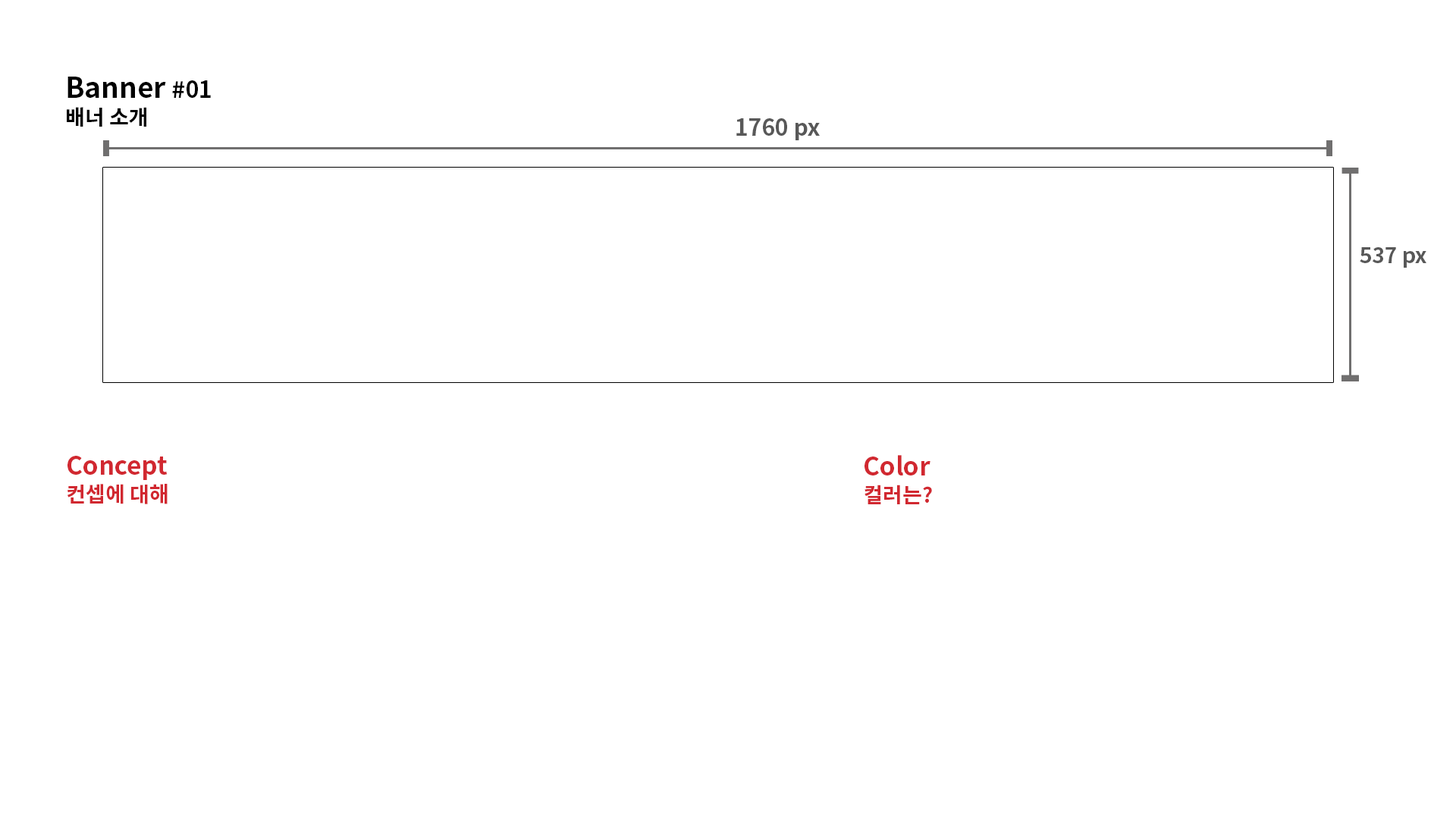
<style>
.page{position:relative;width:1456px;height:819px;background:#ffffff}
.page>*{position:absolute;margin:0}
.t1{font:28.1px/27.3px "NotoSansCJKkr-Bold";color:#000000}
.t2{font:22.7px/27.3px "NotoSansCJKkr-Bold";color:#000000}
.t3{font:21.2px/27.3px "NotoSansCJKkr-Bold";color:#000000}
.t4{font:22.7px "NotoSansCJKkr-Bold";color:#585858}
.t5{font:21.2px "NotoSansCJKkr-Bold";color:#585858}
.t6{font:25px/27.3px "NotoSansCJKkr-Bold";color:#d12830}
.t7{font:21.2px/27.3px "NotoSansCJKkr-Bold";color:#d12830}
</style>
<div class="page">
<p class="t1" style="left:67px;top:77px;width:144px;height:50px">Banner <span class="t2">#01<br></span><span class="t3">배너 소개</span></p>
<p class="t4" style="left:736px;top:118px;width:84px;height:22px">1760 px</p>
<p class="t5" style="left:1360px;top:247px;width:66px;height:21px">537 px</p>
<p class="t6" style="left:67px;top:456px;width:101px;height:48px">Concept <br><span class="t7">컨셉에 대해</span></p>
<p class="t6" style="left:864px;top:455px;width:68px;height:49px">Color <br><span class="t7">컬러는?</span></p>
</div>
